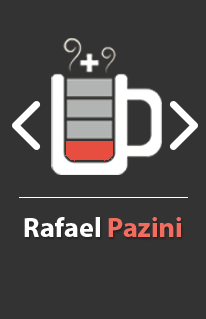
<style>
.page{position:relative;width:206px;height:319px;background:#333333}
.page>*{position:absolute;margin:0}
.t1{font:28px "MyriadPro-Bold";color:#ffffff}
.t2{font:28px "MyriadPro-Bold";color:#f36c60}
</style>
<div class="page">
<p class="t1" style="left:24px;top:217px;width:157px;height:20px">Rafael <span class="t2">Pazini</span></p>
</div>
